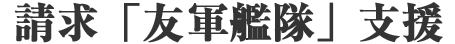
<style>
.page{position:relative;width:455px;height:44px;background:#ffffff}
.page>*{position:absolute;margin:0}
.t1{font:42px "RyuminPr6N-ExBold";color:#343434;font-weight:bold}
</style>
<div class="page">
<p class="t1" style="left:14px;top:2px;width:429px;height:41px">請求「友軍艦隊」支援</p>
</div>
